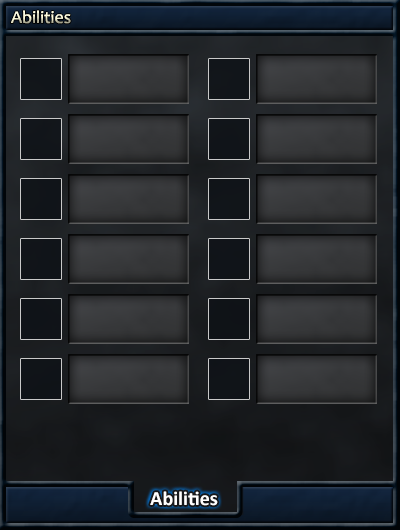
<style>
.page{position:relative;width:400px;height:530px}
.page>*{position:absolute;margin:0}
.t1{font:18px "Candara"}
.t2{font:20px "Calibri-Bold";color:#ffffff}
</style>
<div class="page">
<p class="t1" style="left:11px;top:10px;width:60px;height:14px">Abilities</p>
<p class="t2" style="left:150px;top:491px;width:68px;height:15px">Abilities</p>
</div>
